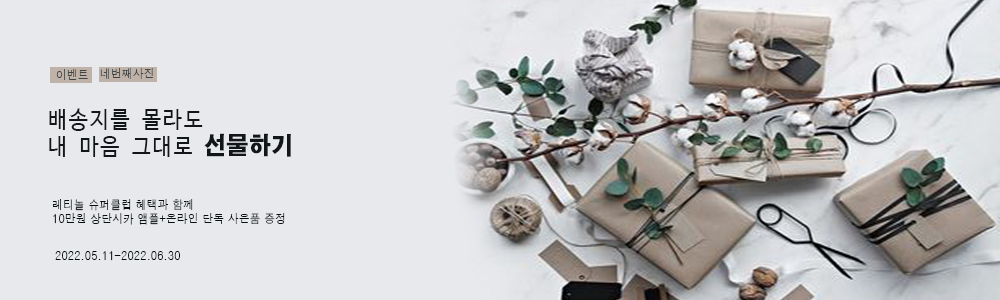
<style>
.page{position:relative;width:1000px;height:300px;background:#e8e9ed}
.page>*{position:absolute;margin:0}
.t1{font:12px "Haansoft-Dotum";letter-spacing:0.01em;color:#404445;text-transform:uppercase;scale:0.9 1}
.t2{font:23px/26.8px "D2Codingligature";letter-spacing:0.01em;color:#131617;text-transform:uppercase;scale:0.9 1}
.t3{font:24px/26.8px "AdobeGothicStd-Bold";letter-spacing:0.01em;color:#131617;text-transform:uppercase;font-weight:bold;scale:0.9 1}
.t4{font:12px/14px "Haansoft-Dotum";letter-spacing:0.01em;color:#070f11;text-transform:uppercase;scale:0.9 1}
.t5{font:12px "Haansoft-Dotum";letter-spacing:0.01em;color:#020a0c;text-transform:uppercase;scale:0.9 1}
</style>
<div class="page">
<p class="t1" style="left:56px;top:69px;width:32px;height:11px">이벤트</p>
<p class="t1" style="left:100px;top:68px;width:53px;height:11px">네번째사진</p>
<p class="t2" style="left:49px;top:108px;width:242px;height:49px">배송지를 몰라도<br>내 마음 그대로 <span class="t3">선물하기</span></p>
<p class="t4" style="left:53px;top:199px;width:232px;height:26px">레티놀 슈퍼클럽 혜택과 함께<br>10만원 상단시카 앰플+온라인 단독 사은품 증정</p>
<p class="t5" style="left:55px;top:251px;width:125px;height:10px">2022.05.11-2022.06.30</p>
</div>
